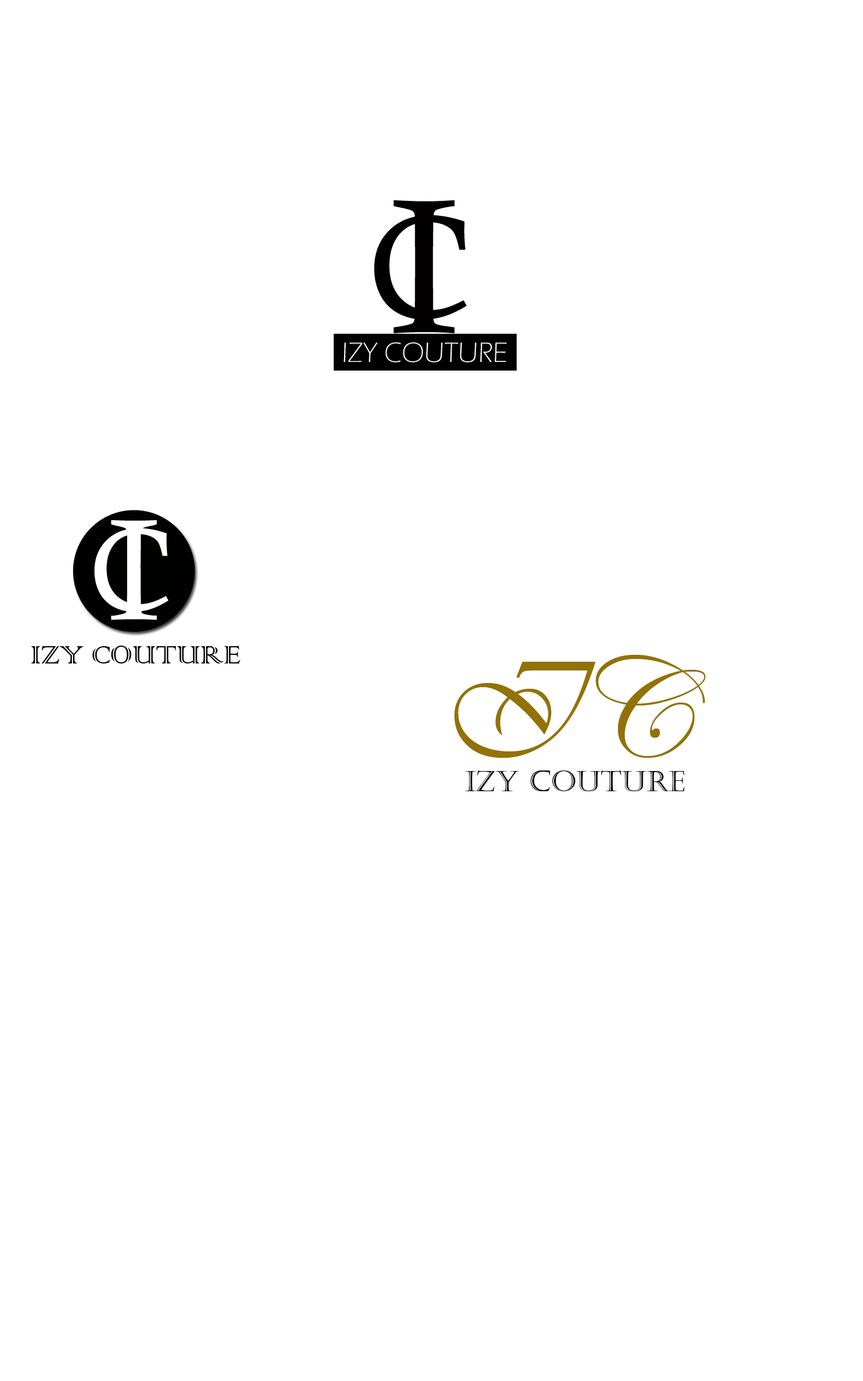
<style>
.page{position:relative;width:863px;height:1381px;background:#ffffff}
.page>*{position:absolute;margin:0}
.t1{font:191.8px "CalistoMT";color:#020001}
.t2{font:143.9px "CalistoMT";color:#020001}
.t3{font:33.6px "ColonnaMT";color:#040000}
.t4{font:143.9px "Vivaldii";color:#927205}
.t5{font:143.9px "EdwardianScriptITC";color:#927205}
.t6{font:28.8px "Castellar";color:#020202}
</style>
<div class="page">
<p class="t1" style="left:394px;top:200px;width:61px;height:133px">I</p>
<p class="t2" style="left:374px;top:215px;width:93px;height:104px">C</p>
<p class="t3" style="left:31px;top:646px;width:210px;height:18px">IZY COUTURE</p>
<p class="t4" style="left:454px;top:662px;width:142px;height:96px">I</p>
<p class="t5" style="left:596px;top:655px;width:110px;height:103px">C</p>
<p class="t6" style="left:465px;top:771px;width:220px;height:20px">IZY COUTURE</p>
</div>
